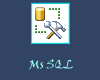
<style>
.page{position:relative;width:100px;height:80px;background:#324464}
.page>*{position:absolute;margin:0}
.t1{font:12px "VinerHandITC";color:#95feee}
</style>
<div class="page">
<p class="t1" style="left:29px;top:59px;width:44px;height:11px">Ms SQL</p>
</div>
